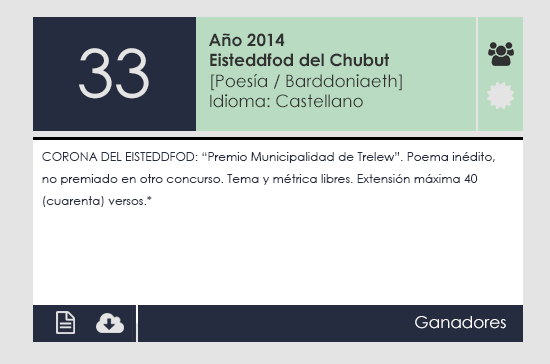
<style>
.page{position:relative;width:550px;height:364px;background:#ffffff}
.page>*{position:absolute;margin:0}
.t1{font:16.9px "CenturyGothic";color:#313131}
.t2{font:16.9px "CenturyGothic-Bold";color:#313131}
.t3{font:66.1px "CenturyGothic";color:#e4e4e4}
.t4{font:12px/22px "CenturyGothic";color:#262c3f}
.t5{font:16.3px "CenturyGothic";color:#ffffff}
</style>
<div class="page">
<p class="t1" style="left:209px;top:33px;width:193px;height:75px"><span class="t2">Año 2014<br>Eisteddfod del Chubut<br></span>[Poesía / Barddoniaeth]<br>Idioma: Castellano</p>
<p class="t3" style="left:79px;top:48px;width:70px;height:51px">33</p>
<p class="t4" style="left:42px;top:152px;width:453px;height:55px">CORONA DEL EISTEDDFOD: “Premio Municipalidad de Trelew”. Poema inédito, <br>no premiado en otro concurso. Tema y métrica libres. Extensión máxima 40 <br>(cuarenta) versos.*</p>
<p class="t5" style="left:415px;top:316px;width:91px;height:13px">Ganadores</p>
</div>
